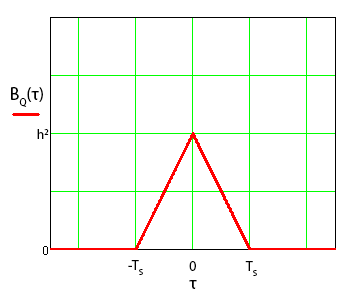
<style>
.page{position:relative;width:355px;height:297px;background:#ffffff}
.page>*{position:absolute;margin:0}
.t1{font:18px "MyriadPro-Regular";color:#000000}
.t2{font:14px "MyriadPro-Regular";color:#000000}
</style>
<div class="page">
<p class="t1" style="left:11px;top:87px;width:32px;height:20px">BQ(τ)</p>
<p class="t2" style="left:37px;top:129px;width:12px;height:10px">h2</p>
<p class="t2" style="left:128px;top:260px;width:15px;height:15px">-TS</p>
<p class="t2" style="left:189px;top:261px;width:7px;height:10px">0</p>
<p class="t2" style="left:245px;top:261px;width:12px;height:15px">TS</p>
<p class="t1" style="left:189px;top:280px;width:8px;height:9px">τ</p>
</div>
